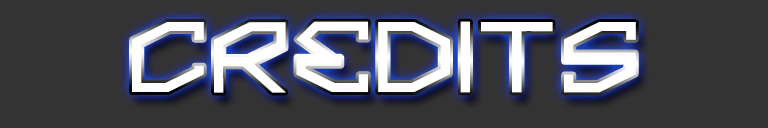
<style>
.page{position:relative;width:768px;height:128px;background:#333333}
.page>*{position:absolute;margin:0}
.t1{font:100px "KinineAlpha";color:#ffffff}
</style>
<div class="page">
<p class="t1" style="left:132px;top:21px;width:504px;height:72px">Credits</p>
</div>
